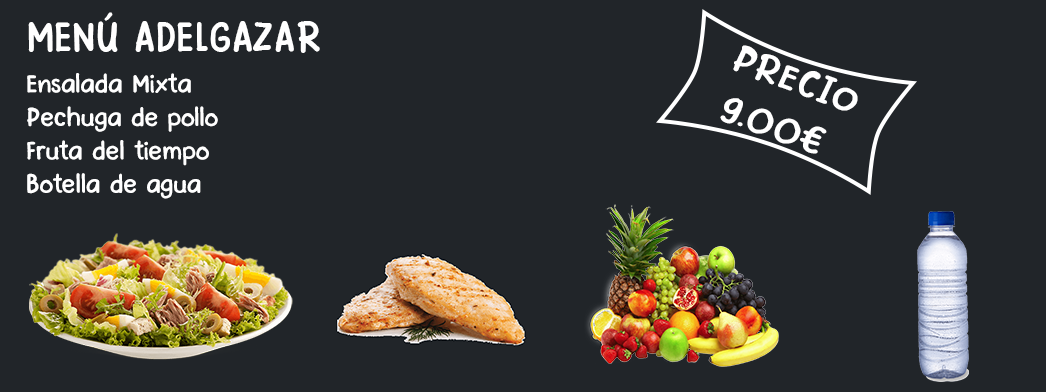
<style>
.page{position:relative;width:1046px;height:392px;background:#212529}
.page>*{position:absolute;margin:0}
.t1{font:45.5px "PinkChicken-Regular";color:#ffffff}
.t2{font:42px "PinkChicken-Regular";color:#ffffff;scale:1.11 1}
.t3{font:27.9px "PinkChicken-Regular";color:#ffffff;scale:1.03 1}
</style>
<div class="page">
<p class="t1" style="left:28px;top:12px;width:292px;height:41px">MENÚ ADELGAZAR</p>
<p class="t2" style="left:720px;top:45px;width:138px;height:109px;text-align:center;rotate:20deg">PRECIO<br>9.00€</p>
<p class="t3" style="left:27px;top:73px;width:191px;height:126px">Ensalada Mixta<br>Pechuga de pollo<br>Fruta del tiempo<br>Botella de agua</p>
</div>
